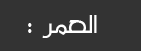
<style>
.page{position:relative;width:141px;height:51px;background:#333333}
.page>*{position:absolute;margin:0}
.t1{font:37.3px "MO_Nawel";letter-spacing:-0.08em;color:#ffffff}
.t2{font:44px "MO_Nawel";letter-spacing:-0.08em;color:#ffffff;scale:0.84 1}
</style>
<div class="page">
<p class="t1" style="left:42px;top:15px;width:55px;height:23px">ا  لعمر</p>
<p class="t2" style="left:28px;top:23px;width:4px;height:10px">:</p>
</div>
